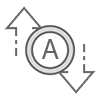
<style>
.page{position:relative;width:100px;height:100px;background:#ffffff}
.page>*{position:absolute;margin:0}
.t1{font:27.7px "ArialMT";letter-spacing:-0.01em;color:#646464;scale:0.89 1}
</style>
<div class="page">
<p class="t1" style="left:42px;top:39px;width:17px;height:20px">A</p>
</div>
